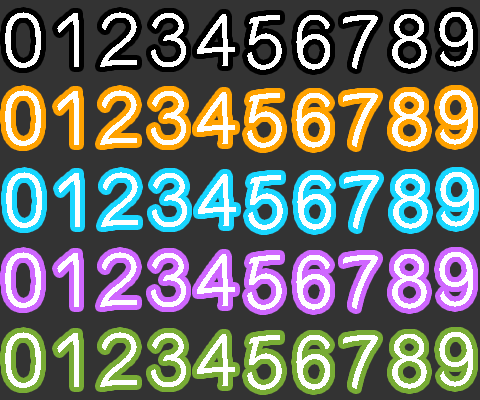
<style>
.page{position:relative;width:480px;height:400px;background:#333333}
.page>*{position:absolute;margin:0}
.t1{font:75px "YuppySC-Regular";color:#ffffff}
.t2{font:72.9px "YuppySC-Regular";color:#ffffff}
</style>
<div class="page">
<p class="t1" style="left:5px;top:12px;width:36px;height:56px">0</p>
<p class="t1" style="left:57px;top:13px;width:22px;height:54px">1</p>
<p class="t1" style="left:100px;top:12px;width:37px;height:55px">2</p>
<p class="t1" style="left:151px;top:13px;width:35px;height:54px">3</p>
<p class="t2" style="left:197px;top:14px;width:38px;height:52px">4</p>
<p class="t1" style="left:247px;top:15px;width:35px;height:55px">5</p>
<p class="t1" style="left:296px;top:15px;width:34px;height:55px">6</p>
<p class="t1" style="left:343px;top:15px;width:35px;height:54px">7</p>
<p class="t1" style="left:392px;top:14px;width:35px;height:55px">8</p>
<p class="t1" style="left:439px;top:12px;width:34px;height:55px">9</p>
<p class="t1" style="left:5px;top:90px;width:36px;height:56px">0</p>
<p class="t1" style="left:57px;top:91px;width:22px;height:54px">1</p>
<p class="t1" style="left:100px;top:90px;width:37px;height:55px">2</p>
<p class="t1" style="left:151px;top:91px;width:35px;height:54px">3</p>
<p class="t2" style="left:197px;top:92px;width:38px;height:52px">4</p>
<p class="t1" style="left:247px;top:93px;width:35px;height:55px">5</p>
<p class="t1" style="left:296px;top:93px;width:34px;height:55px">6</p>
<p class="t1" style="left:343px;top:93px;width:35px;height:54px">7</p>
<p class="t1" style="left:392px;top:92px;width:35px;height:55px">8</p>
<p class="t1" style="left:439px;top:90px;width:34px;height:55px">9</p>
<p class="t1" style="left:6px;top:172px;width:36px;height:56px">0</p>
<p class="t1" style="left:58px;top:173px;width:22px;height:54px">1</p>
<p class="t1" style="left:101px;top:172px;width:37px;height:55px">2</p>
<p class="t1" style="left:152px;top:173px;width:35px;height:54px">3</p>
<p class="t2" style="left:198px;top:174px;width:38px;height:52px">4</p>
<p class="t1" style="left:393px;top:174px;width:35px;height:55px">8</p>
<p class="t1" style="left:440px;top:172px;width:34px;height:55px">9</p>
<p class="t1" style="left:248px;top:175px;width:35px;height:55px">5</p>
<p class="t1" style="left:297px;top:175px;width:34px;height:55px">6</p>
<p class="t1" style="left:344px;top:175px;width:35px;height:54px">7</p>
<p class="t1" style="left:5px;top:252px;width:36px;height:56px">0</p>
<p class="t1" style="left:57px;top:253px;width:22px;height:54px">1</p>
<p class="t1" style="left:100px;top:252px;width:37px;height:55px">2</p>
<p class="t1" style="left:151px;top:253px;width:35px;height:54px">3</p>
<p class="t2" style="left:197px;top:254px;width:38px;height:52px">4</p>
<p class="t1" style="left:247px;top:255px;width:35px;height:55px">5</p>
<p class="t1" style="left:296px;top:255px;width:34px;height:55px">6</p>
<p class="t1" style="left:343px;top:255px;width:35px;height:54px">7</p>
<p class="t1" style="left:392px;top:254px;width:35px;height:55px">8</p>
<p class="t1" style="left:439px;top:252px;width:34px;height:55px">9</p>
<p class="t1" style="left:5px;top:332px;width:36px;height:56px">0</p>
<p class="t1" style="left:57px;top:333px;width:22px;height:54px">1</p>
<p class="t1" style="left:100px;top:332px;width:37px;height:55px">2</p>
<p class="t1" style="left:151px;top:333px;width:35px;height:54px">3</p>
<p class="t2" style="left:197px;top:334px;width:38px;height:52px">4</p>
<p class="t1" style="left:247px;top:335px;width:35px;height:55px">5</p>
<p class="t1" style="left:296px;top:335px;width:34px;height:55px">6</p>
<p class="t1" style="left:343px;top:335px;width:35px;height:54px">7</p>
<p class="t1" style="left:392px;top:334px;width:35px;height:55px">8</p>
<p class="t1" style="left:439px;top:332px;width:34px;height:55px">9</p>
</div>
